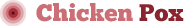
<style>
.page{position:relative;width:184px;height:26px;background:#ffffff}
.page>*{position:absolute;margin:0}
.t1{font:24px "ChunkFive-Roman";color:#cc6e76}
.t2{font:24px "ChunkFive-Roman";color:#89252f}
</style>
<div class="page">
<p class="t1" style="left:36px;top:3px;width:97px;height:19px">Chicken</p>
<p class="t2" style="left:139px;top:4px;width:45px;height:18px">Pox</p>
</div>
